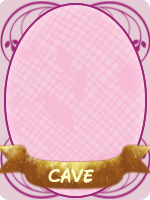
<style>
.page{position:relative;width:150px;height:200px}
.page>*{position:absolute;margin:0}
.t1{font:37.4px "Waltograph";color:#fcfac7}
</style>
<div class="page">
<p class="t1" style="left:48px;top:167px;width:47px;height:16px">cave</p>
</div>
